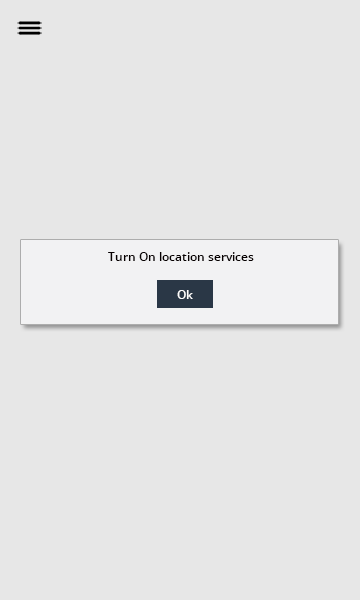
<style>
.page{position:relative;width:360px;height:600px;background:#e7e7e7}
.page>*{position:absolute;margin:0}
.t1{font:12px "OpenSans-Semibold";color:#070101}
.t2{font:12px "OpenSans-Semibold";color:#fefdfd}
</style>
<div class="page">
<p class="t1" style="left:108px;top:252px;width:146px;height:9px">Turn On location services</p>
<p class="t2" style="left:177px;top:290px;width:16px;height:9px">Ok</p>
</div>
